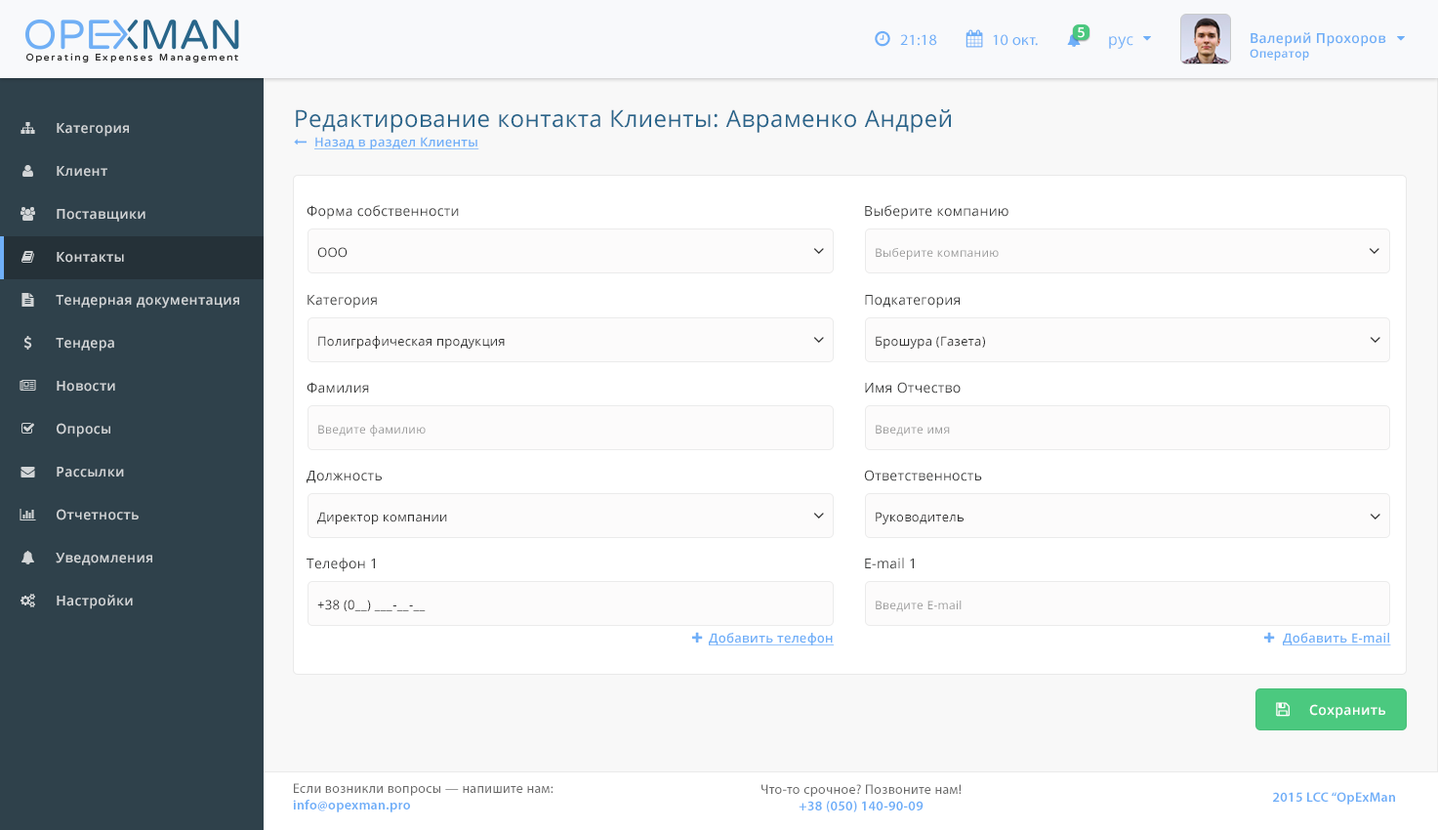
<style>
.page{position:relative;width:1438px;height:830px;background:#ffffff}
.page>*{position:absolute;margin:0}
.t1{font:13.6px "OpenSans-Semibold";letter-spacing:0.025em;color:#ffffff}
.t2{font:15.6px "MyriadPro-Regular";letter-spacing:0.025em;color:#6faff8}
.t3{font:15.6px "OpenSans";letter-spacing:0.025em;color:#6eaff8}
.t4{font:13.6px "OpenSans-Semibold";letter-spacing:0.025em;color:#6eaef7}
.t5{font:11.7px "OpenSans-Semibold";letter-spacing:0.025em;color:#6eaef7}
.t6{font:23.3px "OpenSans";letter-spacing:0.025em;color:#29658b}
.t7{font:13.6px "OpenSans-Semibold";letter-spacing:0.025em;color:#d2d5d7}
.t8{font:12.6px "OpenSans-Semibold";letter-spacing:0.025em;color:#6faff8;text-decoration:underline}
.t9{font:13.6px "OpenSans";letter-spacing:0.025em;color:#373838}
.t10{font:12.6px "OpenSans";letter-spacing:0.025em;color:#333333}
.t11{font:11.7px "OpenSans";letter-spacing:0.025em;color:#999999}
.t12{font:13.6px "MyriadPro-Regular";letter-spacing:0.025em;color:#696969}
.t13{font:13.6px "MyriadPro-Semibold";letter-spacing:0.025em;color:#6eaef8}
</style>
<div class="page">
<p class="t1" style="left:1077px;top:27px;width:7px;height:11px">5</p>
<p class="t2" style="left:900px;top:34px;width:37px;height:12px">21:18</p>
<p class="t2" style="left:992px;top:34px;width:45px;height:12px">10 окт.</p>
<p class="t3" style="left:1109px;top:36px;width:24px;height:13px">рус</p>
<p class="t4" style="left:1249px;top:32px;width:137px;height:29px">Валерий Прохоров<br><span class="t5">Оператор</span></p>
<p class="t6" style="left:296px;top:109px;width:655px;height:24px">Редактирование контакта Клиенты: Авраменко Андрей</p>
<p class="t7" style="left:57px;top:123px;width:72px;height:14px">Категория</p>
<p class="t8" style="left:314px;top:137px;width:165px;height:12px">Назад в раздел Клиенты</p>
<p class="t7" style="left:57px;top:166px;width:50px;height:11px">Клиент</p>
<p class="t7" style="left:57px;top:209px;width:88px;height:13px">Поставщики</p>
<p class="t9" style="left:306px;top:205px;width:153px;height:15px">Форма собственности</p>
<p class="t9" style="left:865px;top:205px;width:143px;height:15px">Выберите компанию</p>
<p class="t7" style="left:57px;top:252px;width:67px;height:11px">Контакты</p>
<p class="t10" style="left:317px;top:247px;width:30px;height:11px">ООО</p>
<p class="t11" style="left:875px;top:248px;width:123px;height:12px">Выберите компанию</p>
<p class="t7" style="left:56px;top:295px;width:183px;height:13px">Тендерная документация</p>
<p class="t9" style="left:307px;top:295px;width:70px;height:13px">Категория</p>
<p class="t9" style="left:865px;top:295px;width:94px;height:13px">Подкатегория</p>
<p class="t7" style="left:56px;top:338px;width:58px;height:13px">Тендера</p>
<p class="t10" style="left:318px;top:336px;width:187px;height:12px">Полиграфическая продукция</p>
<p class="t10" style="left:875px;top:336px;width:110px;height:12px">Брошура (Газета)</p>
<p class="t7" style="left:57px;top:381px;width:58px;height:10px">Новости</p>
<p class="t9" style="left:306px;top:382px;width:63px;height:11px">Фамилия</p>
<p class="t9" style="left:865px;top:382px;width:95px;height:11px">Имя Отчество</p>
<p class="t7" style="left:57px;top:423px;width:53px;height:14px">Опросы</p>
<p class="t11" style="left:318px;top:425px;width:107px;height:11px">Введите фамилию</p>
<p class="t11" style="left:875px;top:425px;width:75px;height:11px">Введите имя</p>
<p class="t7" style="left:57px;top:466px;width:67px;height:11px">Рассылки</p>
<p class="t9" style="left:306px;top:470px;width:76px;height:13px">Должность</p>
<p class="t9" style="left:864px;top:469px;width:118px;height:12px">Ответственность</p>
<p class="t7" style="left:57px;top:508px;width:82px;height:12px">Отчетность</p>
<p class="t10" style="left:317px;top:511px;width:130px;height:13px">Директор компании</p>
<p class="t10" style="left:875px;top:511px;width:88px;height:13px">Руководитель</p>
<p class="t7" style="left:56px;top:552px;width:96px;height:13px">Уведомления</p>
<p class="t9" style="left:306px;top:557px;width:69px;height:15px">Телефон 1</p>
<p class="t9" style="left:865px;top:557px;width:48px;height:12px">E-mail 1</p>
<p class="t7" style="left:57px;top:594px;width:76px;height:15px">Настройки</p>
<p class="t10" style="left:317px;top:599px;width:108px;height:12px">+38 (0__) ___-__-__</p>
<p class="t11" style="left:875px;top:600px;width:86px;height:12px">Введите E-mail</p>
<p class="t8" style="left:709px;top:632px;width:124px;height:13px">Добавить телефон</p>
<p class="t8" style="left:1282px;top:632px;width:109px;height:13px">Добавить E-mail</p>
<p class="t1" style="left:1309px;top:704px;width:76px;height:14px">Сохранить</p>
<p class="t12" style="left:293px;top:783px;width:260px;height:29px">Если возникли вопросы — напишите нам:<br><span class="t13">info@opexman.pro</span></p>
<p class="t12" style="left:761px;top:784px;width:200px;height:28px;text-align:center">Что-то срочное? Позвоните нам!<br><span class="t13">+38 (050) 140-90-09</span></p>
<p class="t13" style="left:1273px;top:791px;width:122px;height:13px">2015 LCC “OpExMan</p>
</div>
